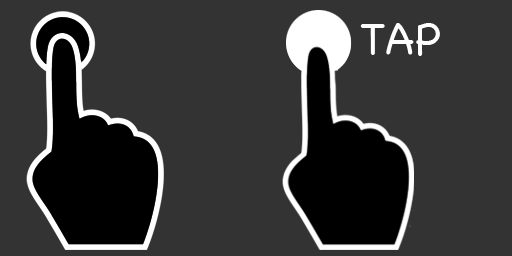
<style>
.page{position:relative;width:512px;height:256px;background:#333333}
.page>*{position:absolute;margin:0}
.t1{font:45px "Chalkboard";color:#ffffff}
</style>
<div class="page">
<p class="t1" style="left:360px;top:23px;width:80px;height:33px">TAP</p>
</div>
